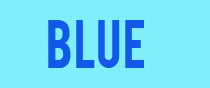
<style>
.page{position:relative;width:210px;height:88px;background:#80eefb}
.page>*{position:absolute;margin:0}
.t1{font:53.6px "Bebas";color:#1259e9;scale:0.91 1}
</style>
<div class="page">
<p class="t1" style="left:48px;top:20px;width:96px;height:48px">blue</p>
</div>
